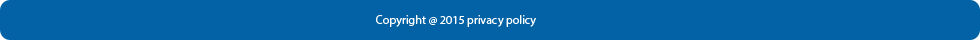
<style>
.page{position:relative;width:980px;height:40px;background:#0262a5}
.page>*{position:absolute;margin:0}
.t1{font:12px "MyriadPro-Regular";color:#ffffff}
</style>
<div class="page">
<p class="t1" style="left:376px;top:15px;width:160px;height:12px">Copyright @ 2015 privacy policy</p>
</div>
